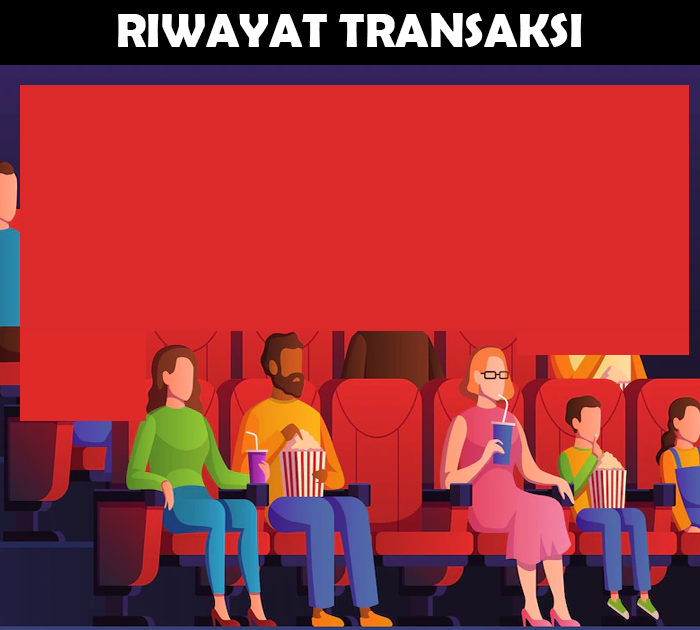
<style>
.page{position:relative;width:700px;height:630px;background:#dc2a2b}
.page>*{position:absolute;margin:0}
.t1{font:48px "BerlinSansFBDemi-Bold";color:#ffffff}
</style>
<div class="page">
<p class="t1" style="left:118px;top:13px;width:464px;height:34px">RIWAYAT TRANSAKSI</p>
</div>
